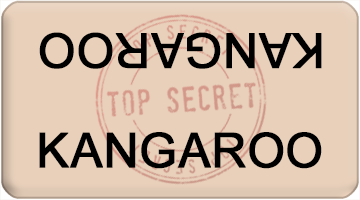
<style>
.page{position:relative;width:360px;height:200px;background:#e8d0bb}
.page>*{position:absolute;margin:0}
.t1{font:48px "ArialMT";color:#000000;font-weight:bold}
</style>
<div class="page">
<p class="t1" style="left:39px;top:32px;width:283px;height:37px;rotate:180deg">KANGAROO</p>
<p class="t1" style="left:39px;top:132px;width:283px;height:37px">KANGAROO</p>
</div>
